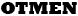
<style>
.page{position:relative;width:78px;height:16px;background:#ffffff}
.page>*{position:absolute;margin:0}
.t1{font:18px "Rockwell-ExtraBold";color:#000000}
</style>
<div class="page">
<p class="t1" style="left:1px;top:2px;width:76px;height:12px">OTMEN</p>
</div>
